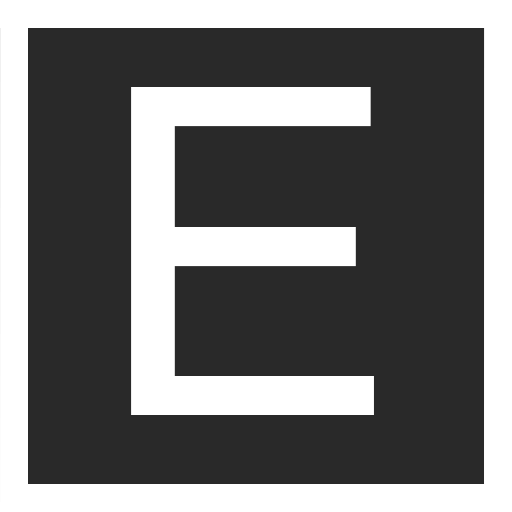
<style>
.page{position:relative;width:512px;height:512px;background:#292929}
.page>*{position:absolute;margin:0}
.t1{font:458.3px "Helvetica";color:#ffffff}
</style>
<div class="page">
<p class="t1" style="left:131px;top:87px;width:243px;height:328px">E</p>
</div>
